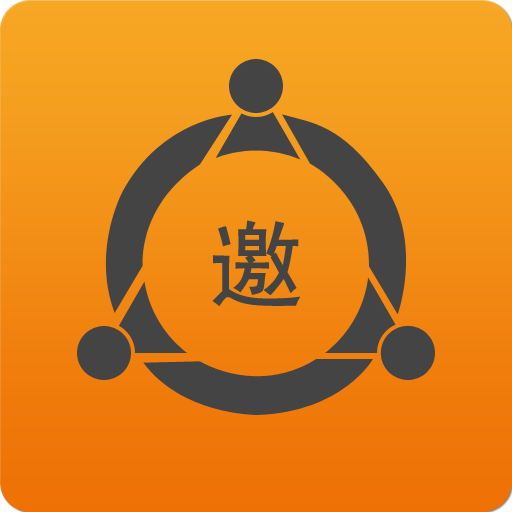
<style>
.page{position:relative;width:512px;height:512px}
.page>*{position:absolute;margin:0}
.t1{font:92.7px "SimHei";letter-spacing:-0.025em;color:#444444;font-weight:bold}
</style>
<div class="page">
<p class="t1" style="left:212px;top:220px;width:88px;height:86px">邀</p>
</div>
